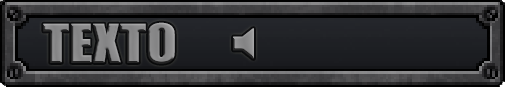
<style>
.page{position:relative;width:505px;height:87px}
.page>*{position:absolute;margin:0}
.t1{font:49.8px "Impact";color:#888889;scale:1.14 1}
</style>
<div class="page">
<p class="t1" style="left:43px;top:22px;width:132px;height:42px">TEXTO</p>
</div>
